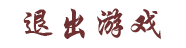
<style>
.page{position:relative;width:186px;height:48px;background:#ffffff}
.page>*{position:absolute;margin:0}
.t1{font:36px "STXingkai";color:#6e3030}
</style>
<div class="page">
<p class="t1" style="left:23px;top:8px;width:138px;height:31px">退出游戏</p>
</div>
